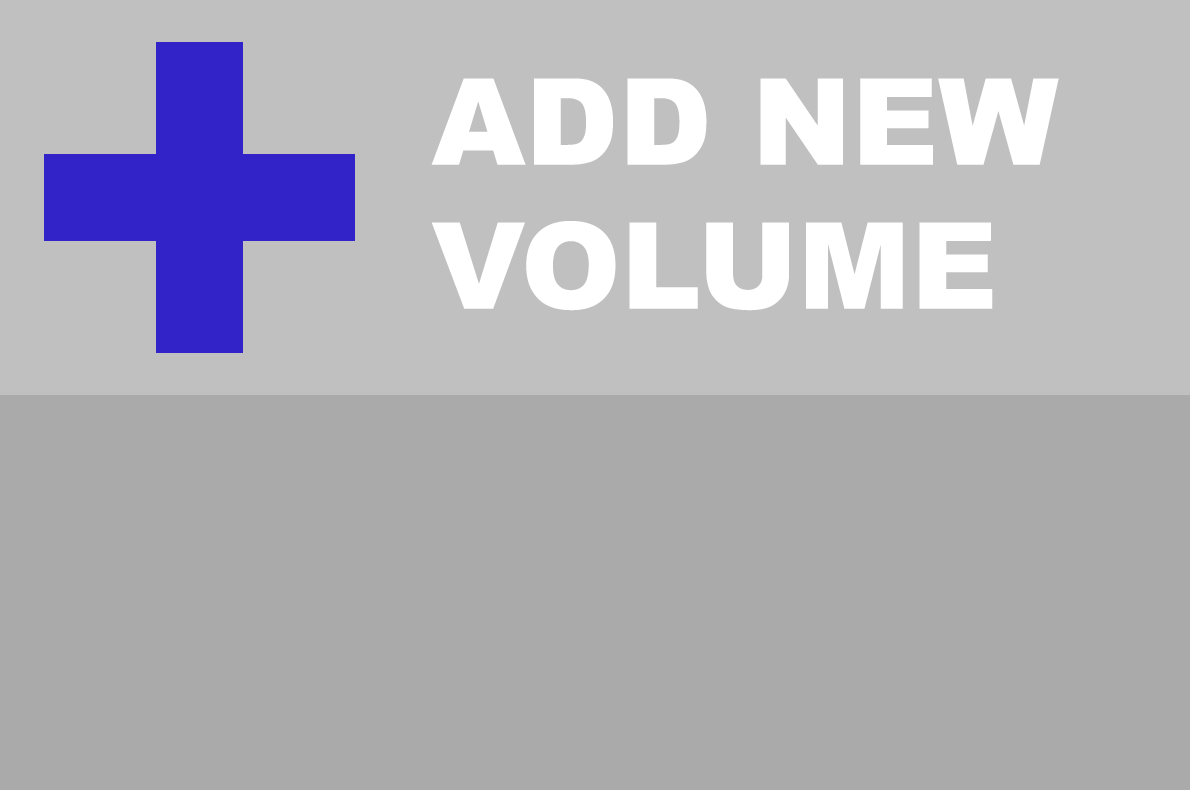
<style>
.page{position:relative;width:1190px;height:790px;background:#aaaaaa}
.page>*{position:absolute;margin:0}
.t1{font:120px "Arial-Black";color:#ffffff}
</style>
<div class="page">
<p class="t1" style="left:431px;top:78px;width:628px;height:233px">ADD NEW<br>VOLUME</p>
</div>
